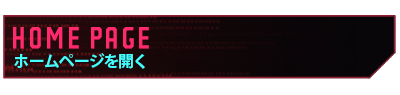
<style>
.page{position:relative;width:400px;height:95px;background:#ffffff}
.page>*{position:absolute;margin:0}
.t1{font:52.5px "Party-Lights-[WLM]-Flat";color:#ff296d}
.t2{font:15.7px "KozGoPr6N-Bold";color:#43ffff}
</style>
<div class="page">
<p class="t1" style="left:13px;top:27px;width:136px;height:22px">Home page</p>
<p class="t2" style="left:14px;top:53px;width:131px;height:16px">ホームページを開く</p>
</div>
